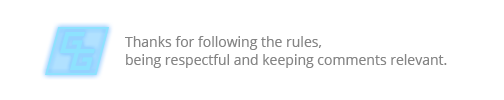
<style>
.page{position:relative;width:504px;height:100px;background:#ffffff}
.page>*{position:absolute;margin:0}
.t1{font:14px/18px "OpenSans";color:#858585}
</style>
<div class="page">
<p class="t1" style="left:125px;top:36px;width:322px;height:32px">Thanks for following the rules,<br>being respectful and keeping comments relevant.</p>
</div>
